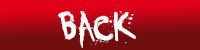
<style>
.page{position:relative;width:200px;height:50px;background:#700e0e}
.page>*{position:absolute;margin:0}
.t1{font:55.4px "YouMurdererBB";color:#fbfbfb}
</style>
<div class="page">
<p class="t1" style="left:58px;top:11px;width:78px;height:37px">Back</p>
</div>
